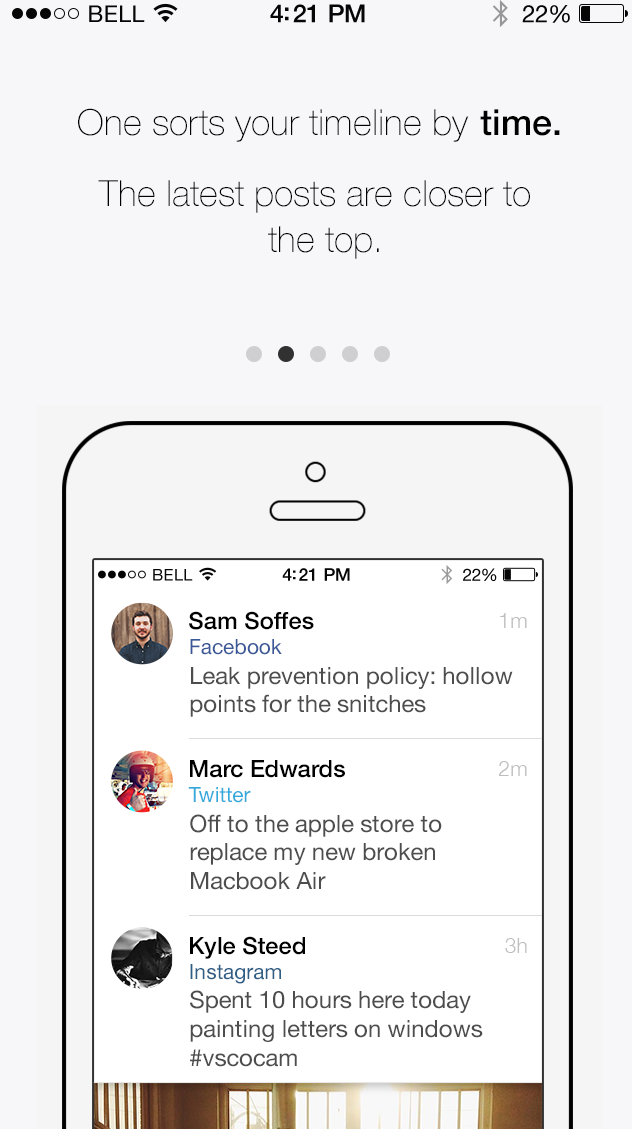
<style>
.page{position:relative;width:632px;height:1129px;background:#f7f7fa}
.page>*{position:absolute;margin:0}
.t1{font:23px "HelveticaNeue";letter-spacing:0.02em;color:#060606}
.t2{font:25px "HelveticaNeue-Medium";letter-spacing:-0.02em;color:#060606}
.t3{font:24px "HelveticaNeue";letter-spacing:-0.02em;color:#060606}
.t4{font:36px "HelveticaNeue-Thin";color:#000000}
.t5{font:36px "HelveticaNeue-Medium";color:#000000}
.t6{font:16.2px "HelveticaNeue";letter-spacing:0.02em;color:#060606}
.t7{font:17.6px "HelveticaNeue-Medium";letter-spacing:-0.02em;color:#060606}
.t8{font:16.9px "HelveticaNeue";letter-spacing:-0.02em;color:#060606}
.t9{font:23.8px "HelveticaNeue-Medium";color:#000000}
.t10{font:21px "HelveticaNeue-Light";color:#bebebe}
.t11{font:21px "HelveticaNeue";color:#3b5998}
.t12{font:23.8px "HelveticaNeue";color:#4d4d4d}
.t13{font:21px "HelveticaNeue";color:#34aadc}
.t14{font:21px "HelveticaNeue";color:#2e5e86}
</style>
<div class="page">
<p class="t1" style="left:89px;top:5px;width:56px;height:17px">BELL</p>
<p class="t2" style="left:270px;top:4px;width:95px;height:19px">4:21 PM</p>
<p class="t3" style="left:522px;top:5px;width:48px;height:18px">22%</p>
<p class="t4" style="left:78px;top:108px;width:391px;height:34px">One sorts your timeline by</p>
<p class="t5" style="left:480px;top:109px;width:80px;height:27px">time.</p>
<p class="t4" style="left:98px;top:180px;width:432px;height:33px">The latest posts are closer to</p>
<p class="t4" style="left:268px;top:226px;width:111px;height:33px">the top.</p>
<p class="t6" style="left:153px;top:569px;width:40px;height:12px">BELL</p>
<p class="t7" style="left:282px;top:568px;width:68px;height:13px">4:21 PM</p>
<p class="t8" style="left:463px;top:568px;width:34px;height:13px">22%</p>
<p class="t9" style="left:189px;top:611px;width:125px;height:19px">Sam Soffes</p>
<p class="t10" style="left:500px;top:613px;width:27px;height:15px">1m</p>
<p class="t11" style="left:190px;top:639px;width:92px;height:16px">Facebook</p>
<p class="t12" style="left:190px;top:667px;width:323px;height:50px">Leak prevention policy: hollow<br>points for the snitches</p>
<p class="t9" style="left:190px;top:760px;width:155px;height:18px">Marc Edwards</p>
<p class="t10" style="left:498px;top:761px;width:29px;height:15px">2m</p>
<p class="t13" style="left:188px;top:787px;width:63px;height:16px">Twitter</p>
<p class="t12" style="left:190px;top:814px;width:252px;height:76px">Off to the apple store to<br>replace my new broken<br>Macbook Air</p>
<p class="t9" style="left:190px;top:936px;width:115px;height:23px">Kyle Steed</p>
<p class="t10" style="left:505px;top:938px;width:22px;height:15px">3h</p>
<p class="t14" style="left:190px;top:964px;width:91px;height:20px">Instagram</p>
<p class="t12" style="left:190px;top:990px;width:293px;height:77px">Spent 10 hours here today <br>painting letters on windows<br>#vscocam</p>
</div>
